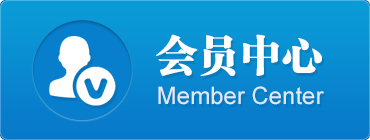
<style>
.page{position:relative;width:370px;height:140px}
.page>*{position:absolute;margin:0}
.t1{font:42px "FZCSJW--GB1-0";color:#ffffff}
.t2{font:24px "ArialMT";color:#dee9f6}
</style>
<div class="page">
<p class="t1" style="left:156px;top:34px;width:166px;height:42px">会员中心</p>
<p class="t2" style="left:158px;top:86px;width:166px;height:19px">Member Center</p>
</div>
